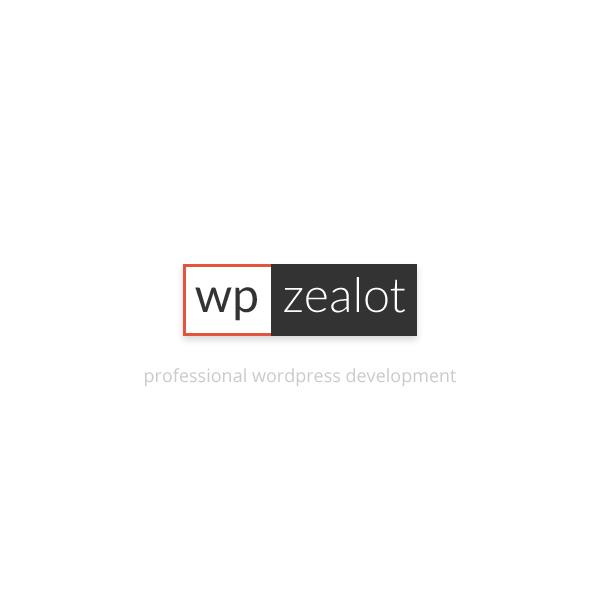
<style>
.page{position:relative;width:600px;height:600px;background:#ffffff}
.page>*{position:absolute;margin:0}
.t1{font:48px "Lato-Light";color:#ffffff}
.t2{font:48px "Lato-Regular";color:#333333}
.t3{font:18px "OpenSans";color:#cacaca}
</style>
<div class="page">
<p class="t1" style="left:284px;top:277px;width:121px;height:36px">zealot</p>
<p class="t2" style="left:195px;top:287px;width:62px;height:34px">wp</p>
<p class="t3" style="left:145px;top:368px;width:311px;height:19px">professional wordpress development</p>
</div>
